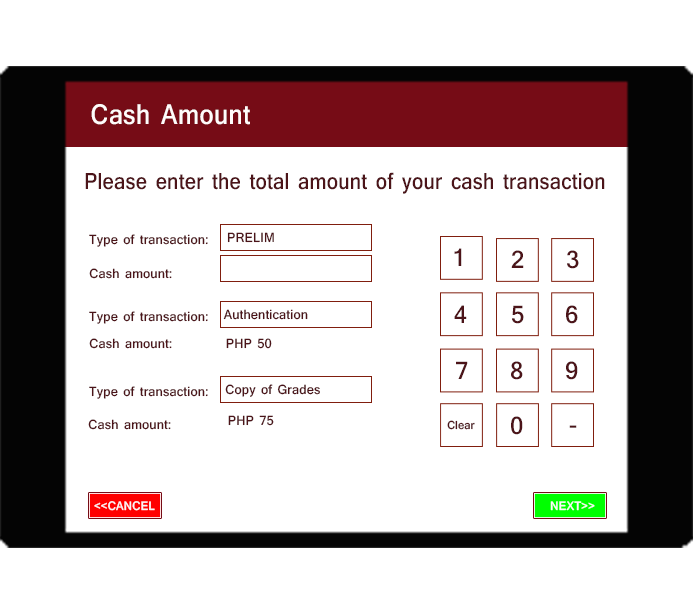
<style>
.page{position:relative;width:693px;height:612px;background:#ffffff}
.page>*{position:absolute;margin:0}
.t1{font:29.9px "Shruti-Bold";letter-spacing:0.01em;color:#fffcfb;scale:0.89 1}
.t2{font:24.2px "Shruti-Bold";letter-spacing:0.01em;color:#4c1419;scale:0.88 1}
.t3{font:14px "Shruti-Bold";letter-spacing:0.01em;color:#4c1419;scale:0.96 1}
.t4{font:26px "Shruti-Bold";letter-spacing:0.01em;color:#4c1419;scale:0.96 1}
.t5{font:12.1px "Shruti-Bold";letter-spacing:0.01em;color:#4c1419;scale:0.96 1}
.t6{font:13px "Shruti-Bold";letter-spacing:0.01em;color:#faf7f7;scale:0.95 1}
.t7{font:13px "Shruti-Bold";letter-spacing:0.01em;color:#fcf9f9;scale:0.95 1}
</style>
<div class="page">
<p class="t1" style="left:91px;top:104px;width:159px;height:21px">Cash Amount</p>
<p class="t2" style="left:85px;top:172px;width:520px;height:22px">Please enter the total amount of your cash transaction</p>
<p class="t3" style="left:227px;top:232px;width:47px;height:11px">PRELIM</p>
<p class="t3" style="left:89px;top:234px;width:119px;height:13px">Type of transaction:</p>
<p class="t4" style="left:454px;top:248px;width:8px;height:18px">1</p>
<p class="t4" style="left:511px;top:250px;width:13px;height:18px">2</p>
<p class="t4" style="left:567px;top:250px;width:12px;height:19px">3</p>
<p class="t3" style="left:89px;top:268px;width:83px;height:11px">Cash amount:</p>
<p class="t4" style="left:454px;top:305px;width:13px;height:18px">4</p>
<p class="t4" style="left:512px;top:305px;width:12px;height:19px">5</p>
<p class="t4" style="left:566px;top:305px;width:12px;height:19px">6</p>
<p class="t3" style="left:89px;top:311px;width:119px;height:13px">Type of transaction:</p>
<p class="t3" style="left:223px;top:309px;width:85px;height:11px">Authentication</p>
<p class="t3" style="left:89px;top:338px;width:83px;height:11px">Cash amount:</p>
<p class="t3" style="left:226px;top:338px;width:46px;height:11px">PHP 50</p>
<p class="t4" style="left:456px;top:361px;width:12px;height:18px">7</p>
<p class="t4" style="left:511px;top:361px;width:12px;height:19px">8</p>
<p class="t4" style="left:566px;top:361px;width:12px;height:19px">9</p>
<p class="t3" style="left:89px;top:386px;width:119px;height:13px">Type of transaction:</p>
<p class="t3" style="left:225px;top:384px;width:95px;height:13px">Copy of Grades</p>
<p class="t3" style="left:88px;top:419px;width:83px;height:11px">Cash amount:</p>
<p class="t3" style="left:228px;top:415px;width:46px;height:11px">PHP 75</p>
<p class="t5" style="left:447px;top:420px;width:28px;height:10px">Clear</p>
<p class="t4" style="left:511px;top:416px;width:12px;height:19px">0</p>
<p class="t4" style="left:569px;top:425px;width:8px;height:3px">-</p>
<p class="t6" style="left:94px;top:501px;width:61px;height:10px">&lt;&lt;CANCEL</p>
<p class="t7" style="left:550px;top:501px;width:45px;height:10px">NEXT&gt;&gt;</p>
</div>
